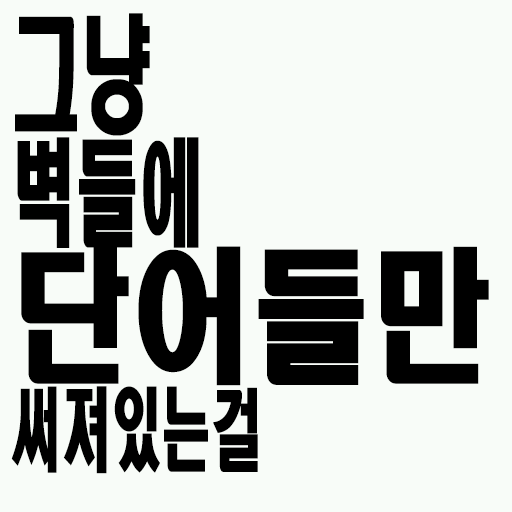
<style>
.page{position:relative;width:512px;height:512px;background:#f8fcf8}
.page>*{position:absolute;margin:0}
.t1{font:90px/120px "HeadlineR-HM";color:#000000;scale:0.56 1}
.t2{font:126px/120px "HeadlineR-HM";color:#000000;scale:0.56 1}
.t3{font:115.2px/120px "HeadlineR-HM";color:#000000;scale:0.56 1}
.t4{font:144px/120px "HeadlineR-HM";color:#000000;scale:0.83 1}
</style>
<div class="page">
<p class="t1" style="left:11px;top:13px;width:478px;height:461px"><span class="t2">그냥<br></span><span class="t3">벽들에<br></span><span class="t4">단어들만<br></span>써져있는걸</p>
</div>
